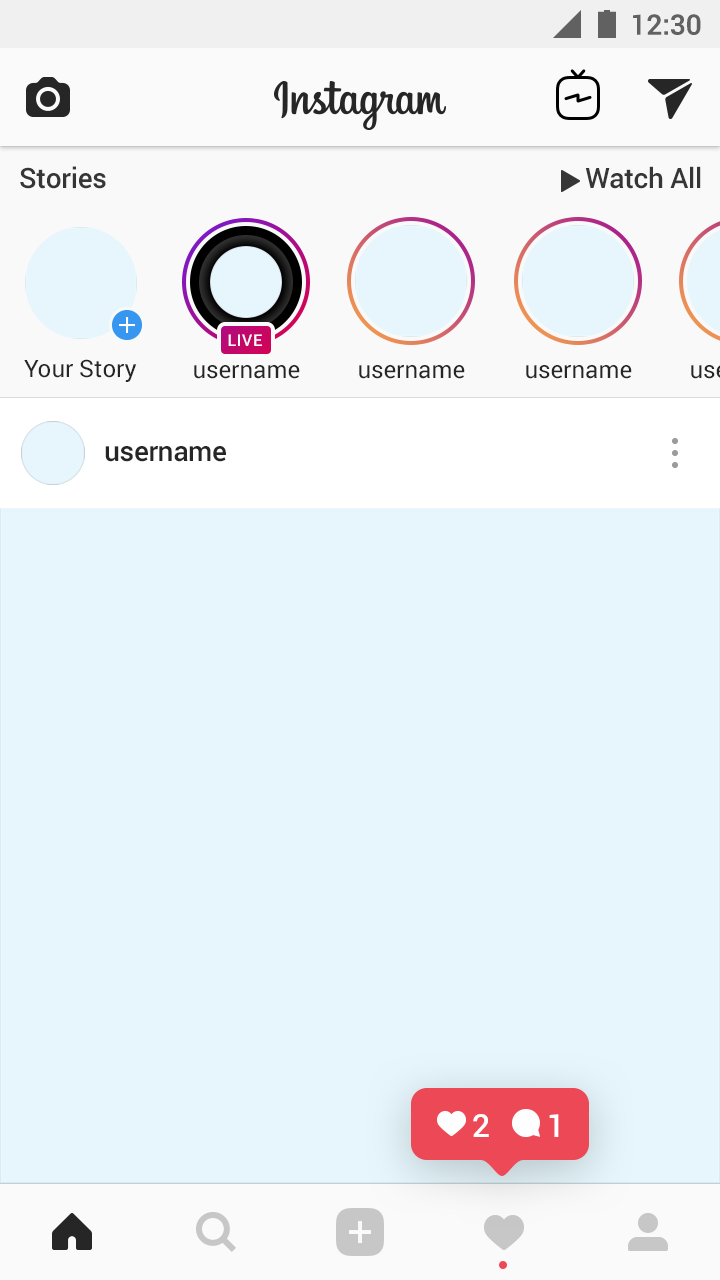
<style>
.page{position:relative;width:720px;height:1280px;background:#e6f6fc}
.page>*{position:absolute;margin:0}
.t1{font:28px "Roboto-Medium";color:#616161}
.t2{font:28px "Roboto-Medium";letter-spacing:-0.01em;color:#363636}
.t3{font:16px "Roboto-Medium";letter-spacing:0.042em;color:#ffffff}
.t4{font:24px "Roboto-Regular";color:#262626}
.t5{font:28px "Roboto-Medium";letter-spacing:-0.011em;color:#262626}
.t6{font:32px "Roboto-Medium";letter-spacing:-0.011em;color:#ffffff}
</style>
<div class="page">
<p class="t1" style="left:633px;top:14px;width:68px;height:21px">12:30</p>
<p class="t2" style="left:20px;top:166px;width:86px;height:23px">Stories</p>
<p class="t2" style="left:585px;top:166px;width:116px;height:23px">Watch All</p>
<p class="t3" style="left:228px;top:334px;width:34px;height:12px">LIVE</p>
<p class="t4" style="left:24px;top:359px;width:113px;height:23px">Your Story</p>
<p class="t4" style="left:194px;top:365px;width:106px;height:14px">username</p>
<p class="t4" style="left:359px;top:365px;width:106px;height:14px">username</p>
<p class="t4" style="left:526px;top:365px;width:106px;height:14px">username</p>
<p class="t5" style="left:105px;top:446px;width:121px;height:16px">username</p>
<p class="t6" style="left:473px;top:1114px;width:16px;height:23px">2</p>
<p class="t6" style="left:549px;top:1114px;width:10px;height:23px">1</p>
</div>
